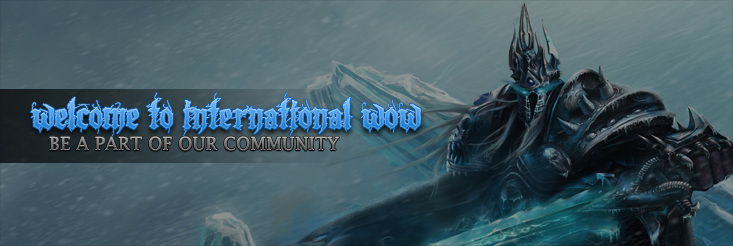
<style>
.page{position:relative;width:733px;height:246px}
.page>*{position:absolute;margin:0}
.t1{font:40.2px "LazyMonk-Demo";scale:1.12 1}
.t2{font:18px "LucidaFax"}
</style>
<div class="page">
<p class="t1" style="left:30px;top:92px;width:391px;height:46px">Welcome to International Wow</p>
<p class="t2" style="left:49px;top:136px;width:290px;height:15px">BE A PART OF OUR COMMUNITY</p>
</div>
